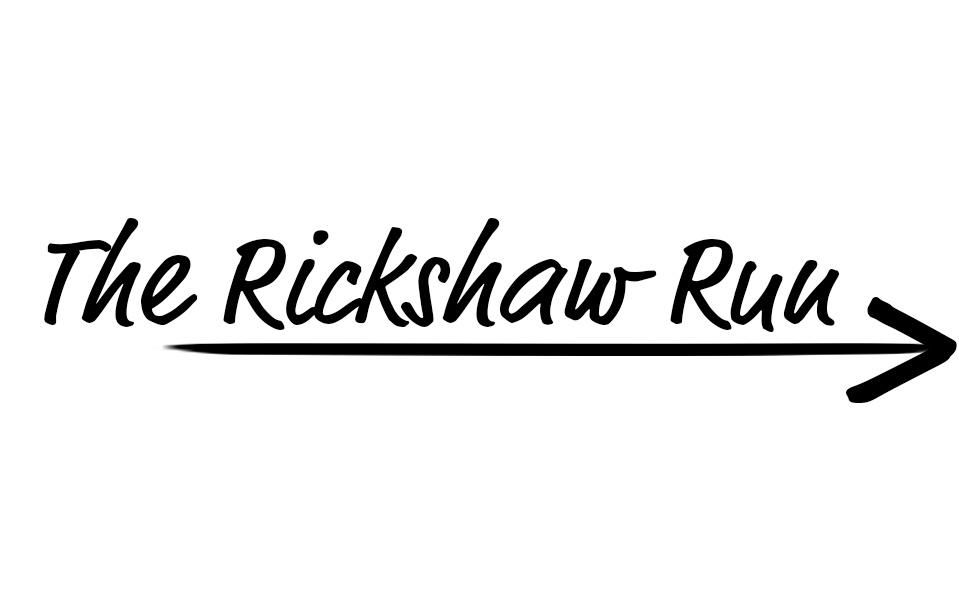
<style>
.page{position:relative;width:959px;height:597px;background:#ffffff}
.page>*{position:absolute;margin:0}
.t1{font:131.5px "MarketOT";color:#000000}
.t2{font:238.3px "MarketOT";color:#000000;scale:1.11 1}
</style>
<div class="page">
<p class="t1" style="left:44px;top:218px;width:796px;height:114px">The Rickshaw Run</p>
<p class="t2" style="left:845px;top:297px;width:112px;height:106px">&gt;</p>
</div>
